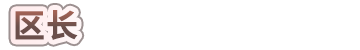
<style>
.page{position:relative;width:360px;height:50px;background:#ffffff}
.page>*{position:absolute;margin:0}
.t1{font:32px "SourceHanSansSC-Bold";font-weight:bold}
</style>
<div class="page">
<p class="t1" style="left:15px;top:10px;width:63px;height:30px">区长</p>
</div>
